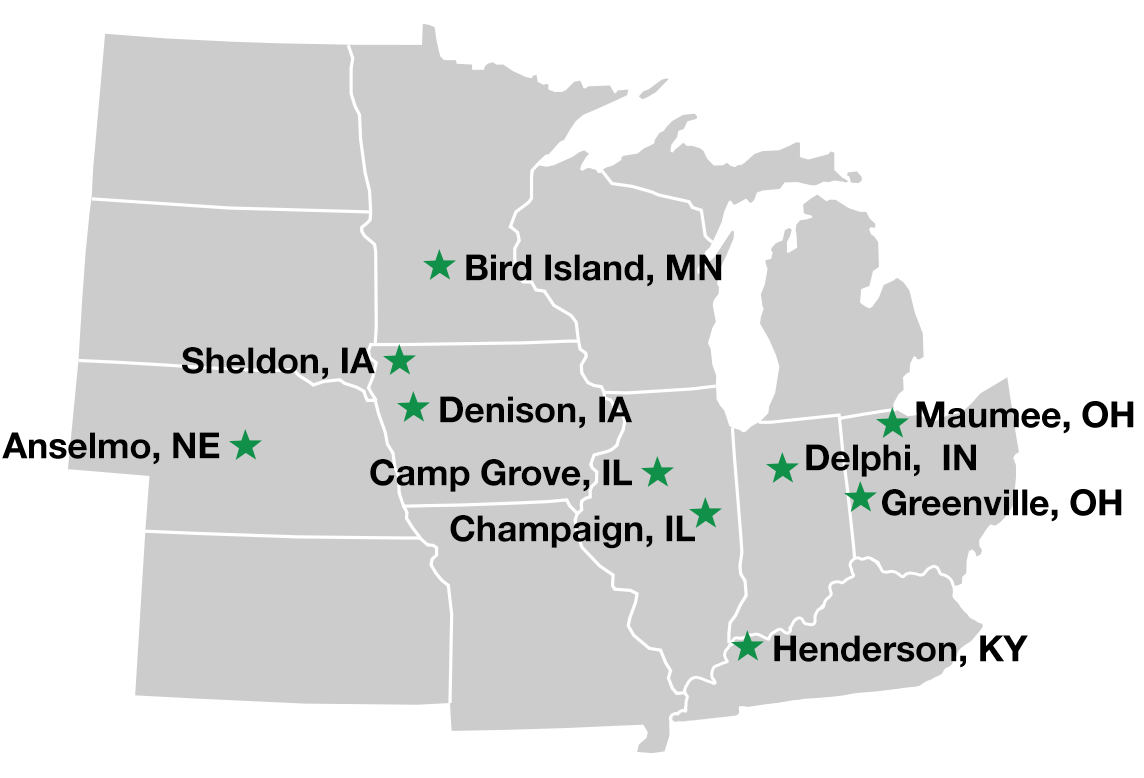
<style>
.page{position:relative;width:1144px;height:778px;background:#cccccc}
.page>*{position:absolute;margin:0}
.t1{font:36px "HelveticaNeue-Bold";letter-spacing:-0.005em;color:#000000}
</style>
<div class="page">
<p class="t1" style="left:466px;top:254px;width:256px;height:33px">Bird Island, MN</p>
<p class="t1" style="left:182px;top:347px;width:193px;height:33px">Sheldon, IA</p>
<p class="t1" style="left:440px;top:396px;width:193px;height:33px">Denison, IA</p>
<p class="t1" style="left:916px;top:401px;width:218px;height:33px">Maumee, OH</p>
<p class="t1" style="left:2px;top:432px;width:218px;height:33px">Anselmo, NE</p>
<p class="t1" style="left:806px;top:444px;width:170px;height:33px">Delphi,  IN</p>
<p class="t1" style="left:370px;top:459px;width:262px;height:33px">Camp Grove, IL</p>
<p class="t1" style="left:882px;top:489px;width:240px;height:33px">Greenville, OH</p>
<p class="t1" style="left:450px;top:515px;width:245px;height:34px">Champaign, IL</p>
<p class="t1" style="left:774px;top:635px;width:254px;height:33px">Henderson, KY</p>
</div>
